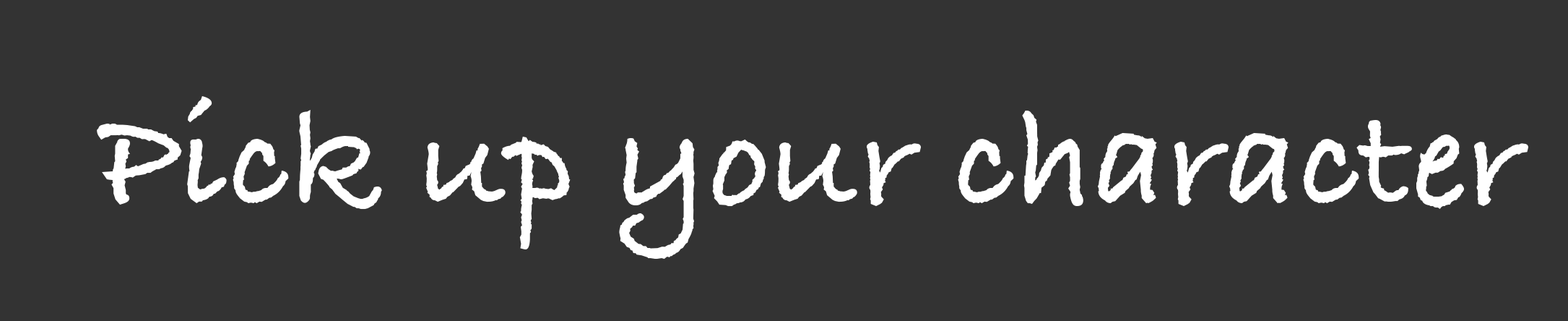
<style>
.page{position:relative;width:1568px;height:321px;background:#333333}
.page>*{position:absolute;margin:0}
.t1{font:144.4px "BradleyHandITCTT-Bold";color:#ffffff}
</style>
<div class="page">
<p class="t1" style="left:97px;top:96px;width:1432px;height:163px">Pick up your character</p>
</div>
